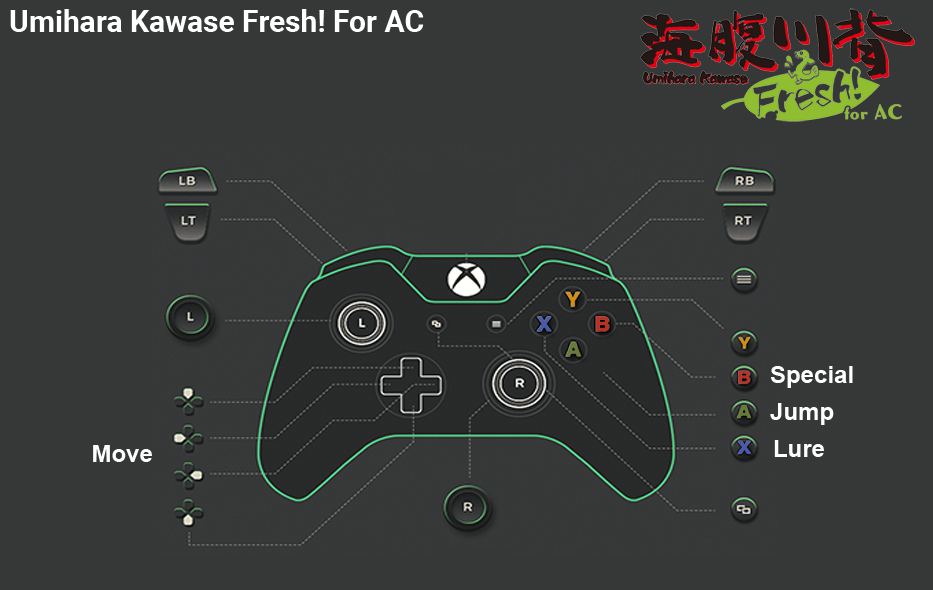
<style>
.page{position:relative;width:933px;height:590px;background:#363838}
.page>*{position:absolute;margin:0}
.t1{font:30px "Roboto-Bold";color:#ffffff}
.t2{font:24px "Arial-BoldMT";color:#fefefe}
</style>
<div class="page">
<p class="t1" style="left:10px;top:9px;width:414px;height:23px">Umihara Kawase Fresh! For AC</p>
<p class="t2" style="left:770px;top:366px;width:83px;height:22px">Special</p>
<p class="t2" style="left:770px;top:403px;width:64px;height:22px">Jump</p>
<p class="t2" style="left:93px;top:445px;width:59px;height:17px">Move</p>
<p class="t2" style="left:774px;top:440px;width:50px;height:17px">Lure</p>
</div>
